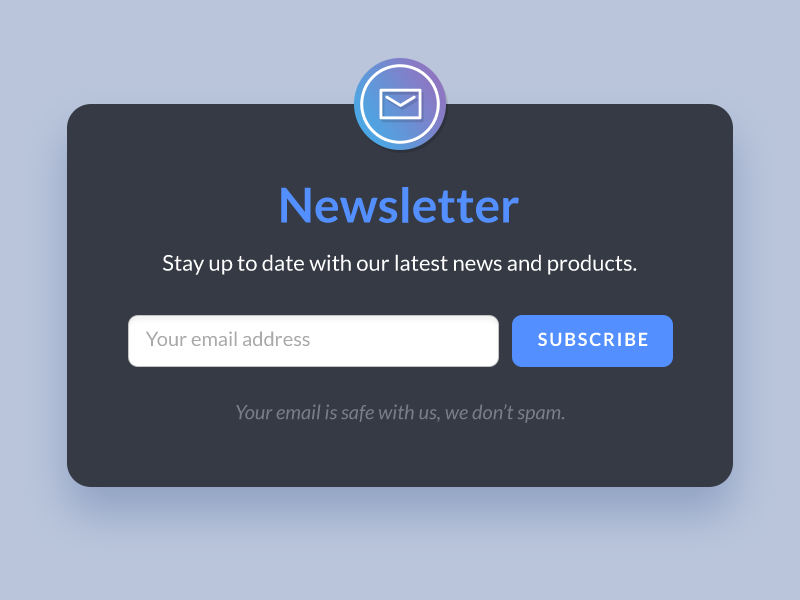
<style>
.page{position:relative;width:800px;height:600px;background:#353a45}
.page>*{position:absolute;margin:0}
.t1{font:48px "Lato-Bold";color:#538fff}
.t2{font:22px "Lato-Regular";color:#ffffff}
.t3{font:20px "Lato-Regular";color:#a9a9a9}
.t4{font:18px "Lato-Bold";letter-spacing:0.1em;color:#ffffff;text-transform:uppercase}
.t5{font:20px "Lato-Italic";color:#787d87}
</style>
<div class="page">
<p class="t1" style="left:281px;top:187px;width:238px;height:36px">Newsletter</p>
<p class="t2" style="left:163px;top:254px;width:474px;height:21px">Stay up to date with our latest news and products.</p>
<p class="t3" style="left:146px;top:331px;width:164px;height:15px">Your email address</p>
<p class="t4" style="left:538px;top:332px;width:110px;height:14px">Subscribe</p>
<p class="t5" style="left:236px;top:404px;width:329px;height:19px">Your email is safe with us, we don’t spam.</p>
</div>
